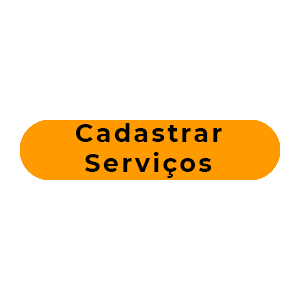
<style>
.page{position:relative;width:300px;height:300px;background:#ffffff}
.page>*{position:absolute;margin:0}
.t1{font:24.6px/30.1px "Montserrat-Bold";letter-spacing:0.1em;color:#000000}
</style>
<div class="page">
<p class="t1" style="left:76px;top:123px;width:146px;height:55px">Cadastrar<br> Serviços</p>
</div>
